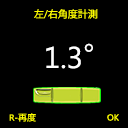
<style>
.page{position:relative;width:128px;height:128px;background:#000000}
.page>*{position:absolute;margin:0}
.t1{font:9.8px "KozGoPr6N-Regular";color:#ffff00}
.t2{font:30px "MicrosoftNewTaiLue";color:#ffffff}
.t3{font:30px "KozGoPr6N-Regular";color:#ffffff}
.t4{font:8.7px "MicrosoftNewTaiLue";color:#ffff00;scale:1.03 1}
.t5{font:8.7px "KozGoPr6N-Regular";color:#ffff00;scale:1.03 1}
.t6{font:8.9px "MicrosoftNewTaiLue";color:#ffff00}
</style>
<div class="page">
<p class="t1" style="left:34px;top:9px;width:64px;height:10px">左/右角度計測</p>
<p class="t2" style="left:46px;top:43px;width:47px;height:26px">1.3<span class="t3">°</span></p>
<p class="t4" style="left:9px;top:113px;width:27px;height:9px">R-<span class="t5">再度</span></p>
<p class="t6" style="left:107px;top:114px;width:12px;height:7px">OK</p>
</div>
